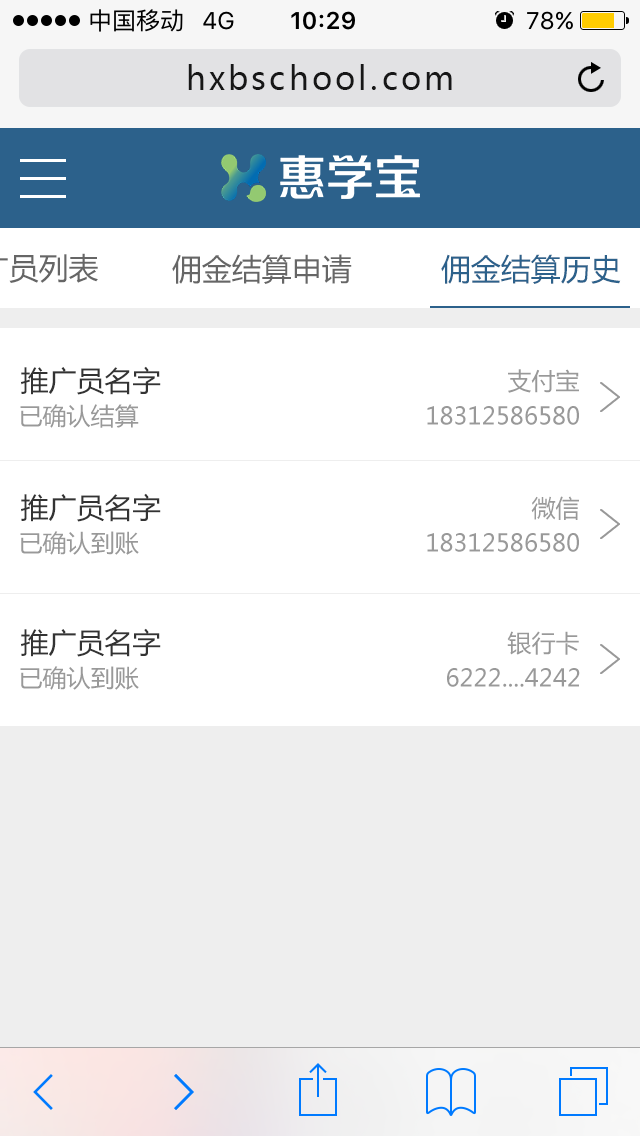
<style>
.page{position:relative;width:640px;height:1136px;background:#ffffff}
.page>*{position:absolute;margin:0}
.t1{font:32px "MicrosoftYaHei";letter-spacing:0.1em;color:#171717}
.t2{font:30px "MicrosoftYaHei";color:#666666}
.t3{font:30px "MicrosoftYaHei";color:#2c618b}
.t4{font:28px "MicrosoftYaHei";color:#333333}
.t5{font:24px "MicrosoftYaHei";color:#999999}
</style>
<div class="page">
<p class="t1" style="left:188px;top:64px;width:264px;height:26px">hxbschool.com</p>
<p class="t2" style="left:172px;top:254px;width:180px;height:30px">佣金结算申请</p>
<p class="t3" style="left:441px;top:254px;width:180px;height:30px">佣金结算历史</p>
<p class="t4" style="left:21px;top:366px;width:140px;height:29px">推广员名字</p>
<p class="t5" style="left:508px;top:369px;width:71px;height:24px">支付宝</p>
<p class="t5" style="left:20px;top:404px;width:119px;height:24px">已确认结算</p>
<p class="t5" style="left:427px;top:406px;width:152px;height:19px">18312586580</p>
<p class="t4" style="left:21px;top:493px;width:140px;height:29px">推广员名字</p>
<p class="t5" style="left:531px;top:496px;width:48px;height:24px">微信</p>
<p class="t5" style="left:20px;top:531px;width:119px;height:24px">已确认到账</p>
<p class="t5" style="left:427px;top:533px;width:152px;height:19px">18312586580</p>
<p class="t4" style="left:21px;top:628px;width:140px;height:29px">推广员名字</p>
<p class="t5" style="left:507px;top:631px;width:72px;height:24px">银行卡</p>
<p class="t5" style="left:20px;top:666px;width:119px;height:24px">已确认到账</p>
<p class="t5" style="left:447px;top:668px;width:133px;height:19px">6222....4242</p>
</div>
